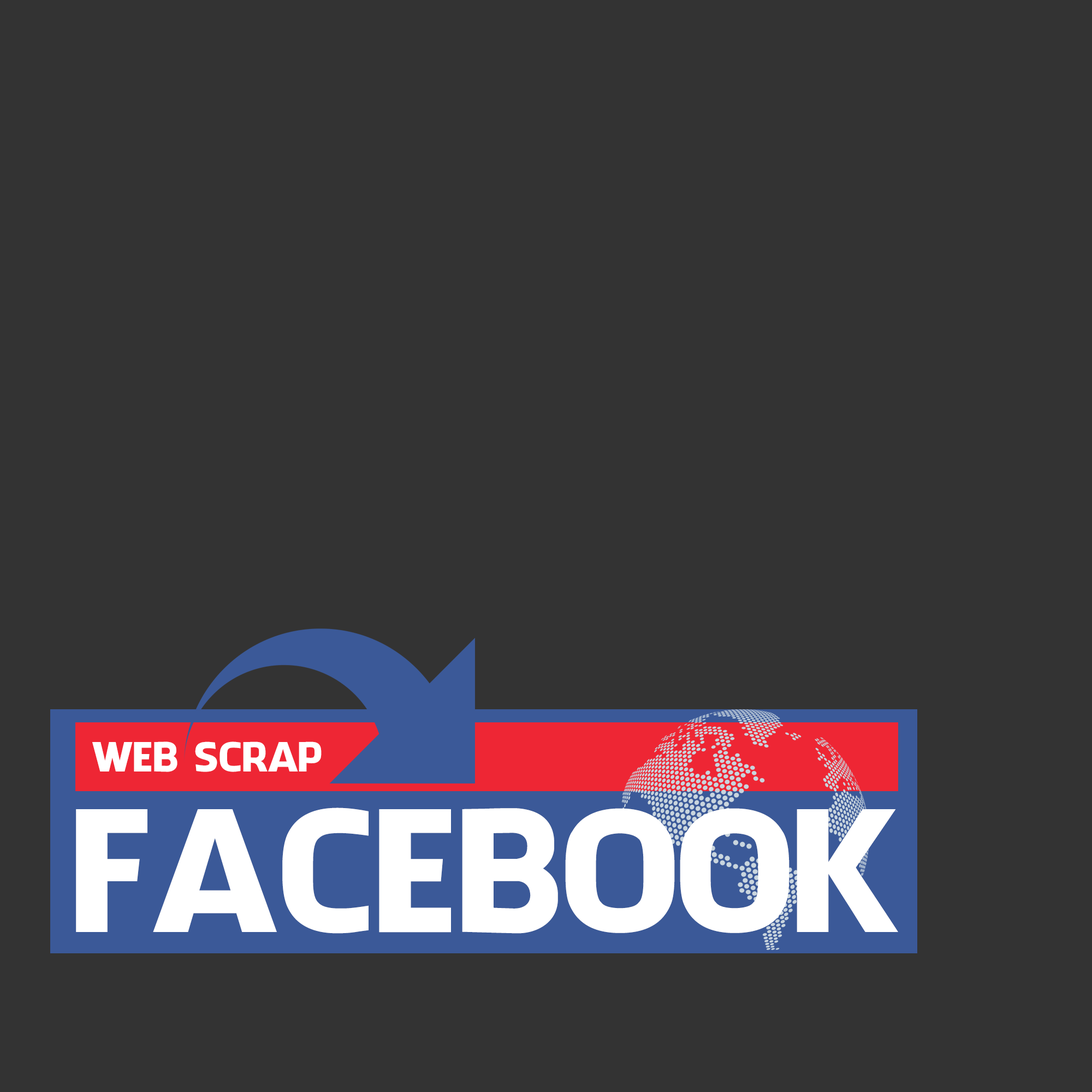
<style>
.page{position:relative;width:1092px;height:1092px;background:#333333}
.page>*{position:absolute;margin:0}
.t1{font:39.3px "FacebookLetterFaces";color:#ffffff;text-transform:uppercase}
.t2{font:163.8px "FacebookLetterFaces";color:#ffffff;text-transform:uppercase}
</style>
<div class="page">
<p class="t1" style="left:92px;top:741px;width:230px;height:31px">WEB SCRAP</p>
<p class="t2" style="left:76px;top:808px;width:822px;height:126px">FACEBOOK</p>
</div>
